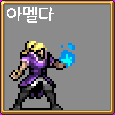
<style>
.page{position:relative;width:115px;height:115px;background:#8b8b8b}
.page>*{position:absolute;margin:0}
.t1{font:18px "MaplestoryLight";color:#ffffff}
</style>
<div class="page">
<p class="t1" style="left:7px;top:7px;width:47px;height:16px">아멜다</p>
</div>
